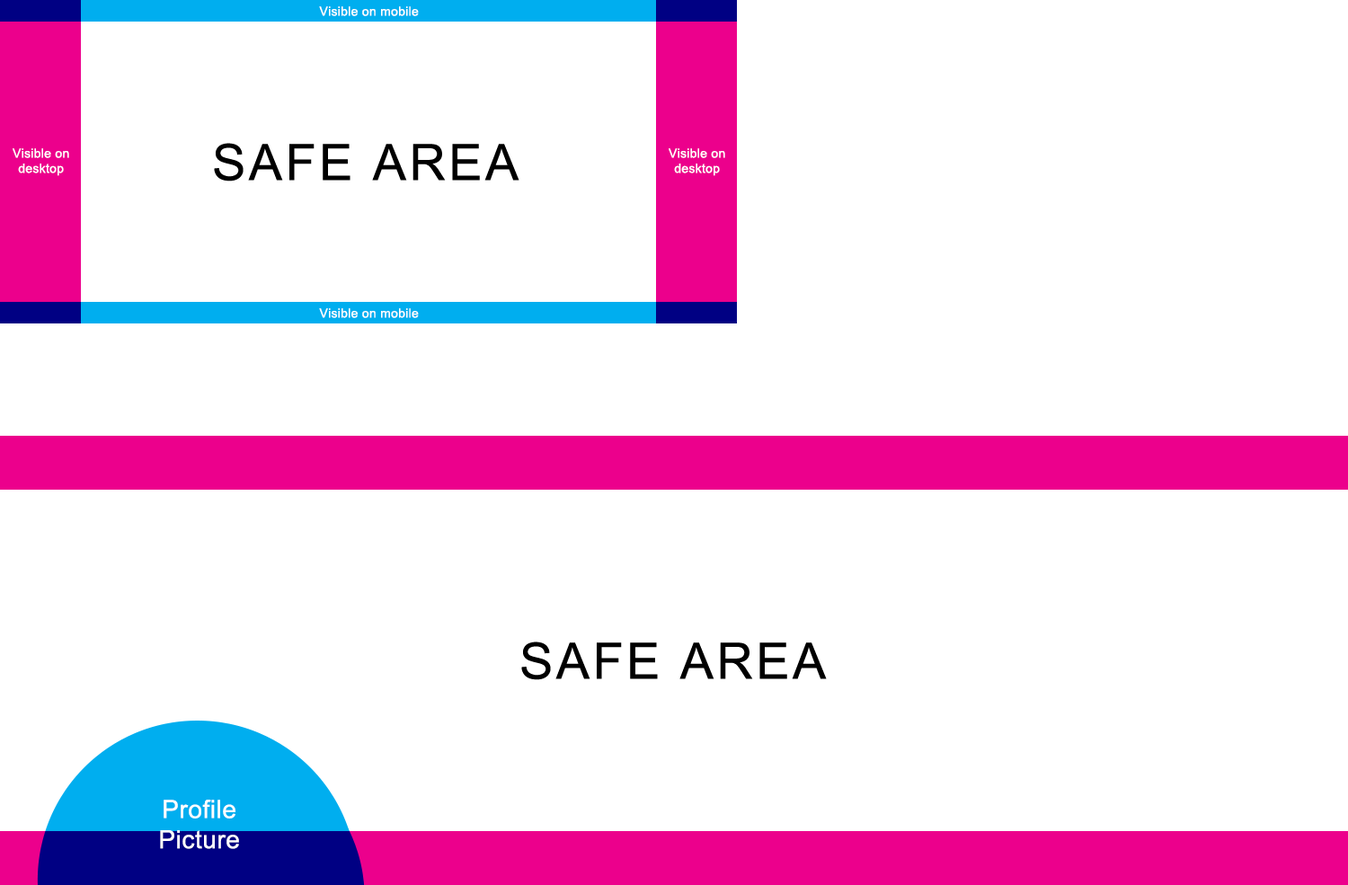
<style>
.page{position:relative;width:1348px;height:885px;background:#ffffff}
.page>*{position:absolute;margin:0}
.t1{font:12.6px "ArialMT";letter-spacing:0.02em;color:#ffffff}
.t2{font:50.3px "ArialMT";letter-spacing:0.06em;color:#000000;text-transform:uppercase}
.t3{font:25.2px "ArialMT";letter-spacing:0.02em;color:#ffffff}
</style>
<div class="page">
<p class="t1" style="left:319px;top:6px;width:100px;height:10px">Visible on mobile</p>
<p class="t1" style="left:13px;top:148px;width:56px;height:28px;text-align:center">Visible on<br>desktop</p>
<p class="t2" style="left:214px;top:143px;width:305px;height:38px">Safe Area</p>
<p class="t1" style="left:668px;top:148px;width:57px;height:28px;text-align:center">Visible on<br>desktop</p>
<p class="t1" style="left:319px;top:308px;width:100px;height:10px">Visible on mobile</p>
<p class="t2" style="left:521px;top:641px;width:305px;height:39px">Safe Area</p>
<p class="t3" style="left:160px;top:800px;width:79px;height:49px;text-align:center">Profile<br>Picture</p>
</div>
